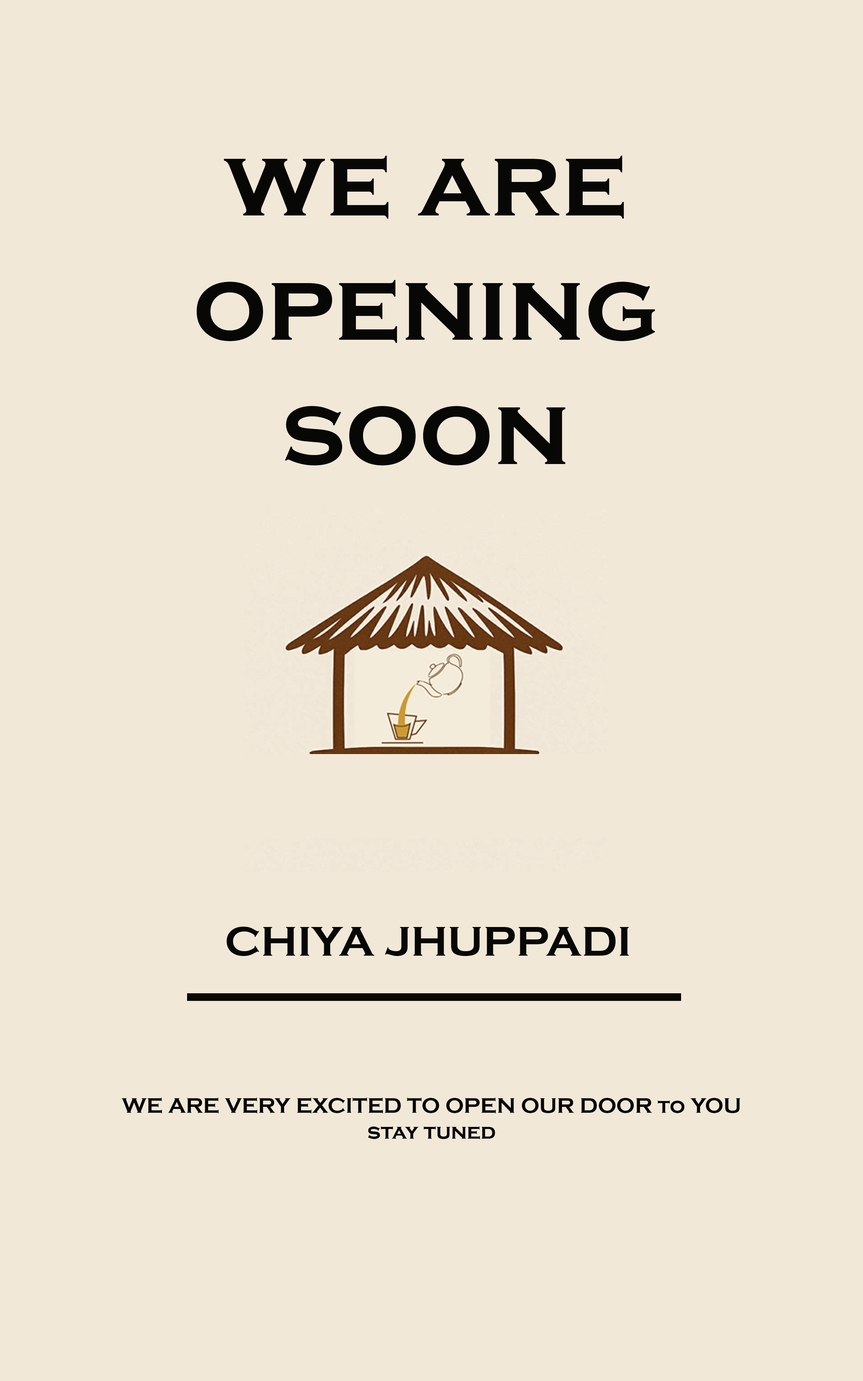
<style>
.page{position:relative;width:863px;height:1381px;background:#f1e8d8}
.page>*{position:absolute;margin:0}
.t1{font:103.6px "CopperplateGothic-Bold";color:#070706}
.t2{font:43.2px "CopperplateGothic-Bold";color:#070706}
.t3{font:21.6px "CopperplateGothic-Bold";color:#070706}
</style>
<div class="page">
<p class="t1" style="left:196px;top:156px;width:459px;height:309px;text-align:center">we are<br>opening<br>soon</p>
<p class="t2" style="left:227px;top:927px;width:402px;height:29px">CHIYA JHUPPADI</p>
<p class="t3" style="left:122px;top:1098px;width:619px;height:42px;text-align:center">WE ARE VERY EXCITED TO OPEN OUR DOOR to YOU<br>stay tuned</p>
</div>
